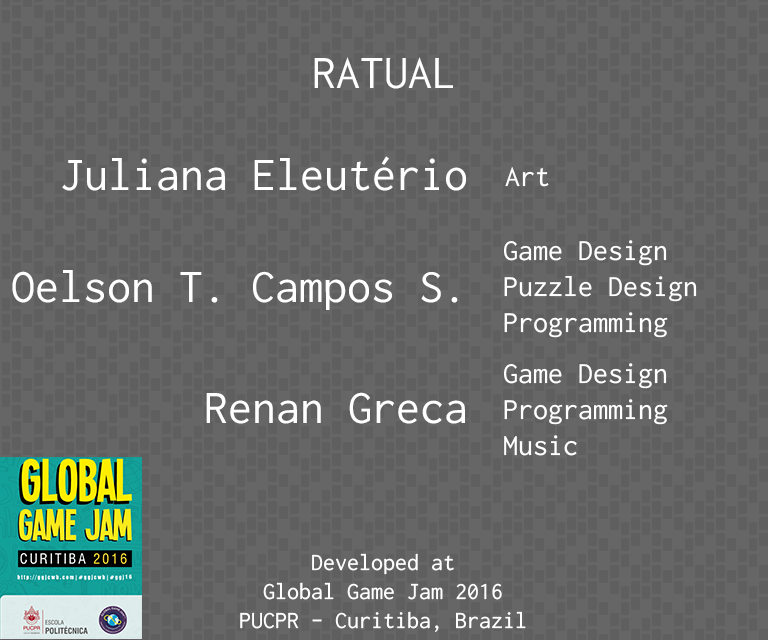
<style>
.page{position:relative;width:768px;height:640px;background:#666666}
.page>*{position:absolute;margin:0}
.t1{font:48px "Inconsolata";color:#ffffff}
.t2{font:30px "Inconsolata";color:#ffffff}
.t3{font:24px "Inconsolata";color:#ffffff}
</style>
<div class="page">
<p class="t1" style="left:314px;top:57px;width:139px;height:32px">RATUAL</p>
<p class="t1" style="left:62px;top:156px;width:404px;height:35px">Juliana Eleutério</p>
<p class="t2" style="left:505px;top:167px;width:44px;height:20px">Art</p>
<p class="t2" style="left:504px;top:240px;width:193px;height:98px">Game Design<br>Puzzle Design<br>Programming</p>
<p class="t1" style="left:12px;top:270px;width:446px;height:40px">Oelson T. Campos S.</p>
<p class="t2" style="left:504px;top:363px;width:164px;height:93px">Game Design<br>Programming<br>Music</p>
<p class="t1" style="left:206px;top:392px;width:259px;height:32px">Renan Greca</p>
<p class="t3" style="left:240px;top:553px;width:286px;height:79px;text-align:center">Developed at<br>Global Game Jam 2016<br>PUCPR - Curitiba, Brazil</p>
</div>
